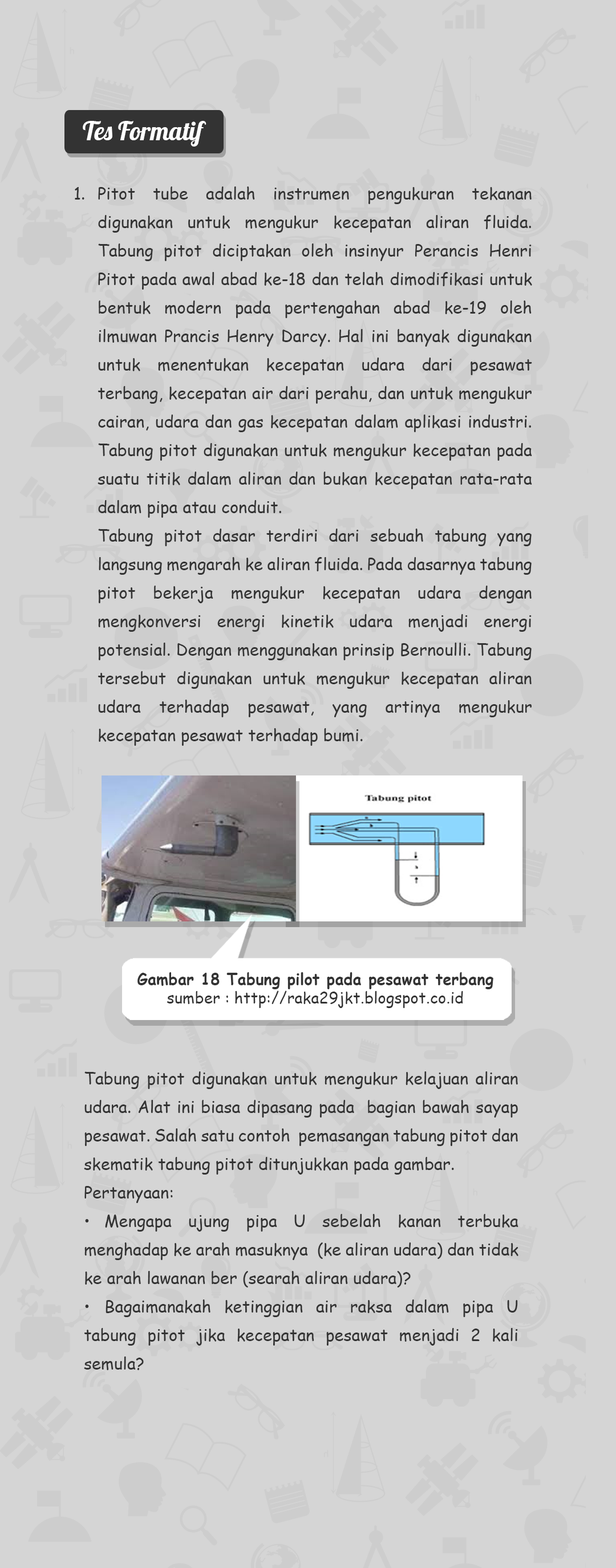
<style>
.page{position:relative;width:616px;height:1568px;background:#d5d5d5}
.page>*{position:absolute;margin:0}
.t1{font:25.3px "Lobster-Regular";color:#ffffff}
.t2{font:16.6px "ComicSansMS";color:#333333}
.t3{font:16.6px/28.5px "ComicSansMS";color:#333333}
.t4{font:15.9px/19.1px "ComicSansMS-Bold";color:#333333}
.t5{font:15.9px/19.1px "ComicSansMS";color:#333333}
</style>
<div class="page">
<p class="t1" style="left:83px;top:121px;width:123px;height:26px">Tes Formatif</p>
<p class="t2" style="left:75px;top:187px;width:9px;height:13px">1.</p>
<p class="t3" style="left:98px;top:186px;width:434px;height:560px;text-align:justify">Pitot tube adalah instrumen pengukuran tekanan digunakan untuk mengukur kecepatan aliran fluida. Tabung pitot diciptakan oleh insinyur Perancis Henri Pitot pada awal abad ke-18 dan telah dimodifikasi untuk bentuk modern pada pertengahan abad ke-19 oleh ilmuwan Prancis Henry Darcy. Hal ini banyak digunakan untuk menentukan kecepatan udara dari pesawat terbang, kecepatan air dari perahu, dan untuk mengukur cairan, udara dan gas kecepatan dalam aplikasi industri. Tabung pitot digunakan untuk mengukur kecepatan pada suatu titik dalam aliran dan bukan kecepatan rata-rata dalam pipa atau conduit.<br>Tabung pitot dasar terdiri dari sebuah tabung yang langsung mengarah ke aliran fluida. Pada dasarnya tabung pitot bekerja mengukur kecepatan udara dengan mengkonversi energi kinetik udara menjadi energi potensial. Dengan menggunakan prinsip Bernoulli. Tabung tersebut digunakan untuk mengukur kecepatan aliran udara terhadap pesawat, yang artinya mengukur kecepatan pesawat terhadap bumi.</p>
<p class="t4" style="left:137px;top:972px;width:356px;height:36px;text-align:center">Gambar 18 Tabung pilot pada pesawat terbang<br><span class="t5">sumber : http://raka29jkt.blogspot.co.id</span></p>
<p class="t3" style="left:84px;top:1071px;width:434px;height:299px;text-align:justify">Tabung pitot digunakan untuk mengukur kelajuan aliran udara. Alat ini biasa dipasang pada  bagian bawah sayap pesawat. Salah satu contoh  pemasangan tabung pitot dan skematik tabung pitot ditunjukkan pada gambar. <br>Pertanyaan:<br>• Mengapa ujung pipa U sebelah kanan terbuka  menghadap ke arah masuknya  (ke aliran udara) dan tidak ke arah lawanan ber (searah aliran udara)? <br>• Bagaimanakah ketinggian air raksa dalam pipa U tabung pitot jika kecepatan pesawat menjadi 2 kali semula?</p>
</div>
